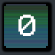
<style>
.page{position:relative;width:55px;height:55px}
.page>*{position:absolute;margin:0}
.t1{font:24.3px "Terminal";color:#ffffff}
</style>
<div class="page">
<p class="t1" style="left:18px;top:14px;width:18px;height:22px">0</p>
</div>
